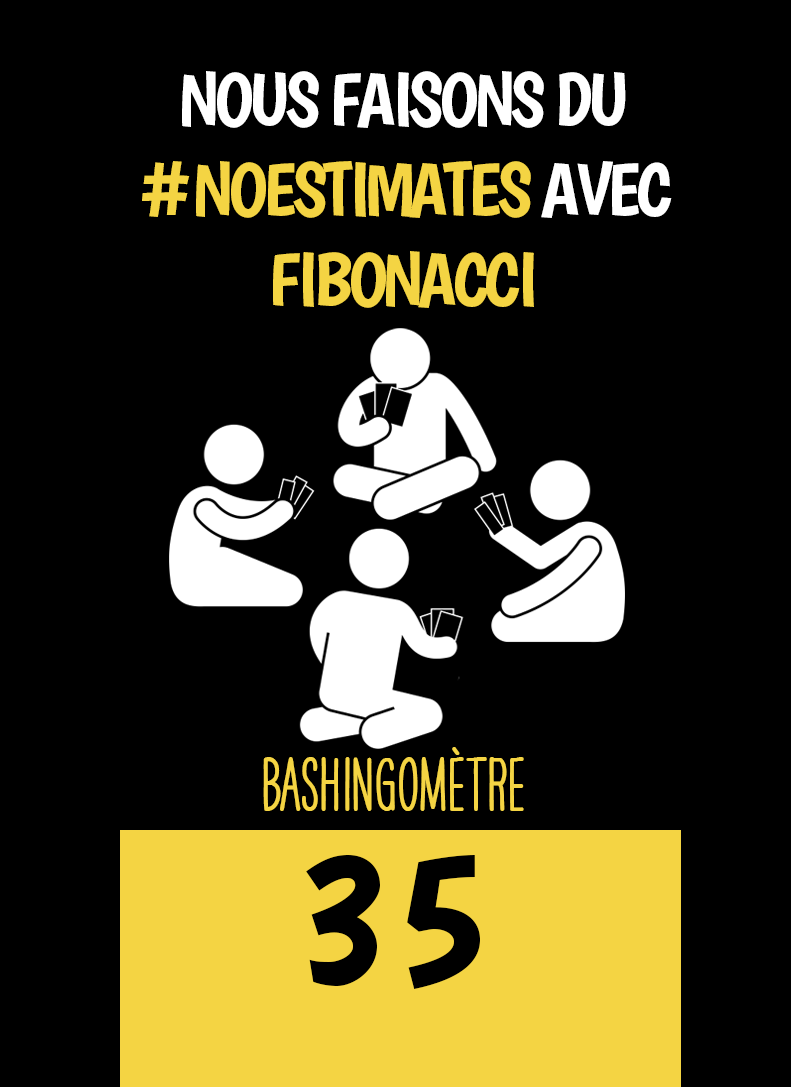
<style>
.page{position:relative;width:791px;height:1087px;background:#000000}
.page>*{position:absolute;margin:0}
.t1{font:75px "Boogaloo-Regular";letter-spacing:-0.06em;color:#ffffff}
.t2{font:75px "Boogaloo-Regular";letter-spacing:-0.06em;color:#f4d443}
.t3{font:66.7px "HAVEANICEDAYTallW04-Bold";color:#f4d443}
.t4{font:200px "Boogaloo-Regular";color:#000000}
</style>
<div class="page">
<p class="t1" style="left:142px;top:71px;width:530px;height:237px;text-align:center">NOUS FAISONS DU <span class="t2">#NOESTIMATES </span>AVEC <span class="t2">FIBONACCI <br></span>PERMET</p>
<p class="t3" style="left:263px;top:747px;width:261px;height:64px">BASHINgomètre</p>
<p class="t4" style="left:306px;top:855px;width:174px;height:134px">35</p>
</div>
